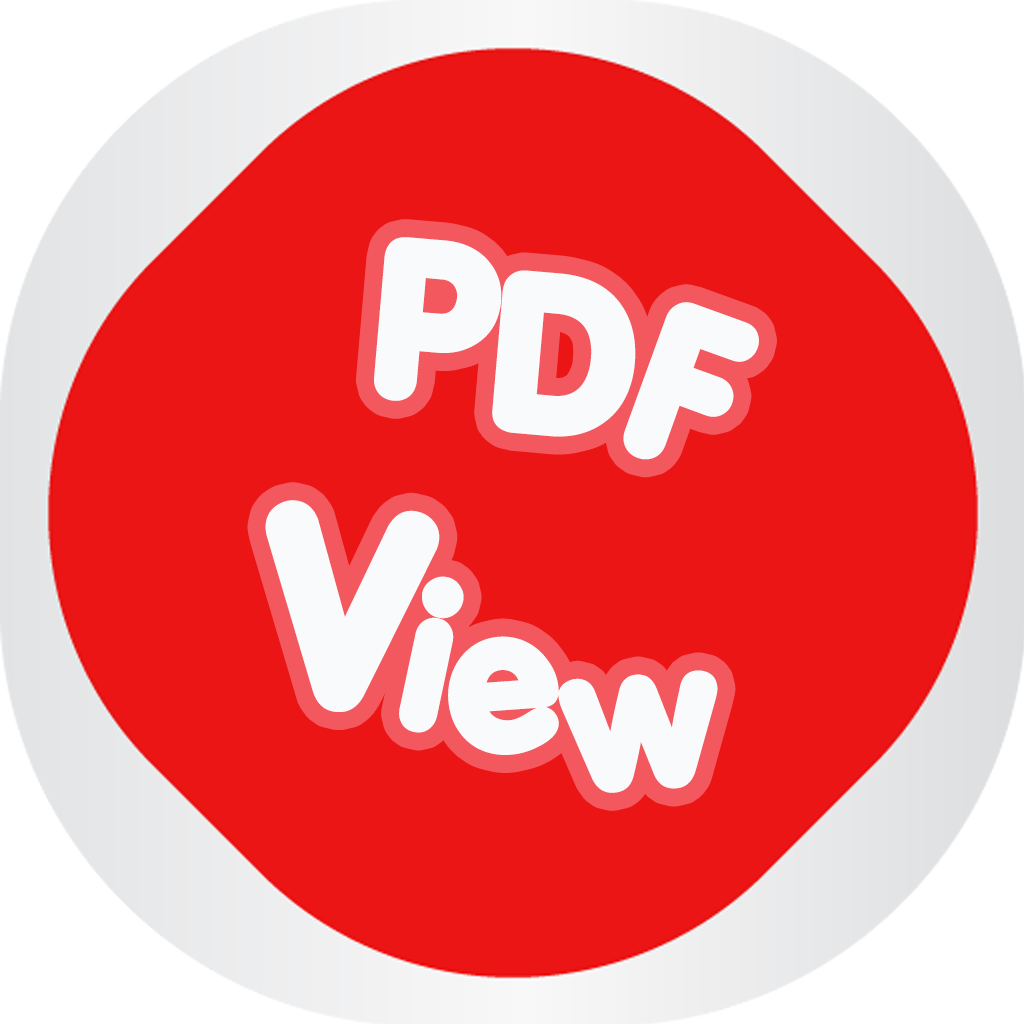
<style>
.page{position:relative;width:1024px;height:1024px;background:#ea1514}
.page>*{position:absolute;margin:0}
.t1{font:213.3px "Porkys";letter-spacing:0.025em;color:#f9fafc}
.t2{font:267.3px "Porkys";letter-spacing:0.025em;color:#f9fafc}
.t3{font:195.3px "Porkys";letter-spacing:0.025em;color:#f9fafc}
</style>
<div class="page">
<p class="t1" style="left:265px;top:237px;width:494px;height:556px;text-align:right;rotate:15deg">PDF <br><span class="t2">V</span><span class="t3">iew</span></p>
</div>
